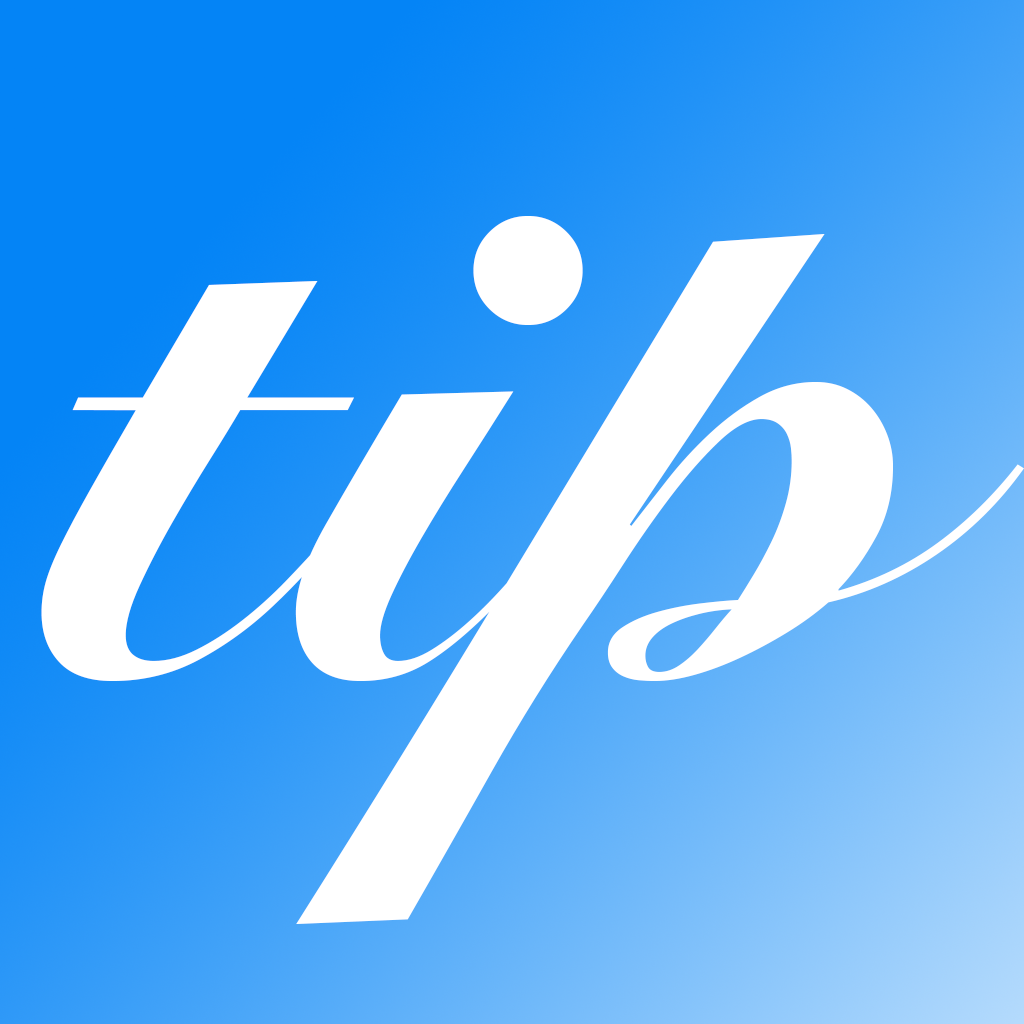
<style>
.page{position:relative;width:1024px;height:1024px}
.page>*{position:absolute;margin:0}
.t1{font:778.9px "SnellRoundhand-Black";color:#ffffff}
</style>
<div class="page">
<p class="t1" style="left:41px;top:216px;width:983px;height:708px">tip</p>
</div>
